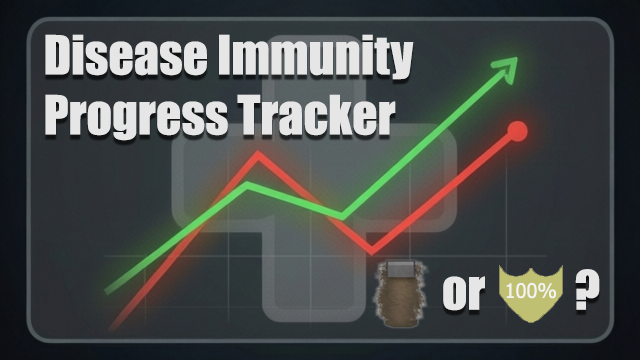
<style>
.page{position:relative;width:640px;height:360px}
.page>*{position:absolute;margin:0}
.t1{font:50px "Impact";color:#e6e6e6}
</style>
<div class="page">
<p class="t1" style="left:45px;top:34px;width:369px;height:107px">Disease Immunity<br>Progress Tracker</p>
<p class="t1" style="left:575px;top:269px;width:25px;height:41px">?</p>
<p class="t1" style="left:443px;top:276px;width:42px;height:35px">or</p>
</div>
